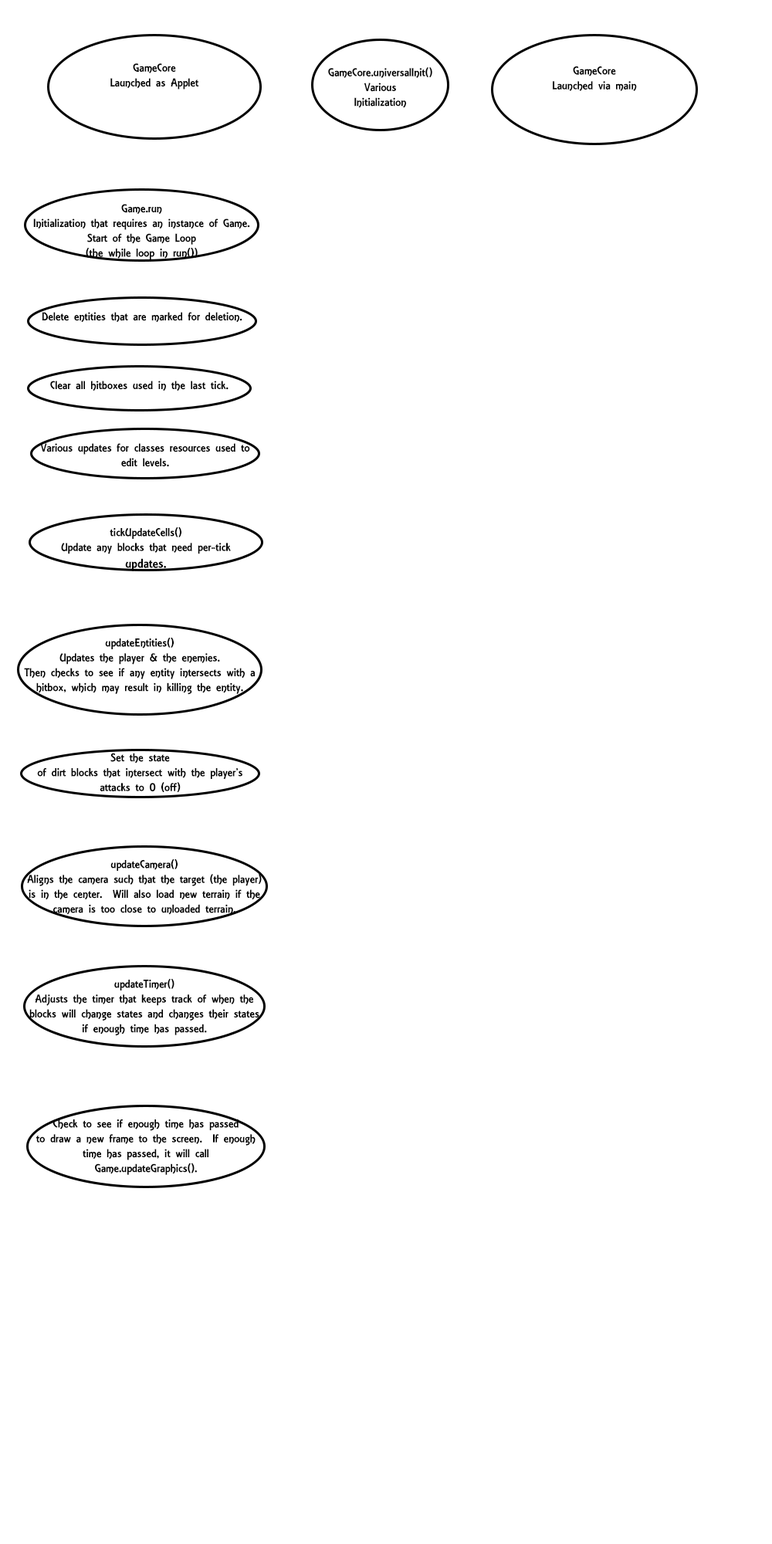
<style>
.page{position:relative;width:772px;height:1544px;background:#ffffff}
.page>*{position:absolute;margin:0}
.t1{font:12.4px "ARESSENCE";color:#000000}
.t2{font:13.9px "ARESSENCE";color:#000000}
</style>
<div class="page">
<p class="t1" style="left:110px;top:63px;width:89px;height:27px;text-align:center">GameCore<br>Launched as Applet</p>
<p class="t1" style="left:328px;top:67px;width:104px;height:41px;text-align:center">GameCore.universalInit()<br>Various<br>Initialization</p>
<p class="t1" style="left:552px;top:66px;width:85px;height:25px;text-align:center"><span class="t2"><br><br></span>GameCore<br>Launched via main</p>
<p class="t1" style="left:33px;top:204px;width:217px;height:55px;text-align:center"><span class="t2"><br></span>Game.run<br>Initialization that requires an instance of Game.<br>Start of the Game Loop<br>(the while loop in run())</p>
<p class="t1" style="left:42px;top:312px;width:200px;height:11px"><span class="t2"><br></span>Delete entities that are marked for deletion.</p>
<p class="t1" style="left:50px;top:381px;width:179px;height:10px"><span class="t2"><br></span>Clear all hitboxes used in the last tick.</p>
<p class="t1" style="left:40px;top:443px;width:210px;height:24px;text-align:center"><span class="t2"><br></span>Various updates for classes resources used to edit levels.</p>
<p class="t1" style="left:61px;top:527px;width:170px;height:44px;text-align:center">tickUpdateCells()<br>Update any blocks that need per-tick <span class="t2">updates.</span></p>
<p class="t1" style="left:24px;top:637px;width:231px;height:58px;text-align:center">updateEntities()<br>Updates the player &amp; the enemies.<br>Then checks to see if any entity intersects with a hitbox, which may result in killing the entity.</p>
<p class="t1" style="left:37px;top:753px;width:205px;height:40px;text-align:center">Set the state of dirt blocks that intersect with the player’s attacks to 0 (off)</p>
<p class="t1" style="left:27px;top:859px;width:235px;height:56px;text-align:center">updateCamera()<br>Aligns the camera such that the target (the player) is in the center.  Will also load new terrain if the camera is too close to unloaded terrain.</p>
<p class="t1" style="left:29px;top:978px;width:230px;height:58px;text-align:center">updateTimer()<br>Adjusts the timer that keeps track of when the blocks will change states and changes their states if enough time has passed.</p>
<p class="t1" style="left:36px;top:1120px;width:220px;height:55px;text-align:center">Check to see if enough time has passed to draw a new frame to the screen.  If enough time has passed, it will call Game.updateGraphics().</p>
</div>
